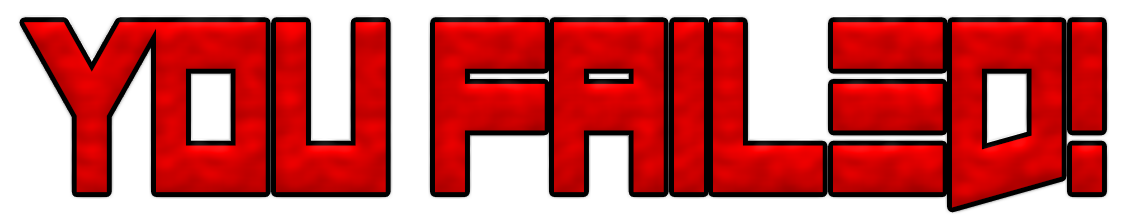
<style>
.page{position:relative;width:1127px;height:217px;background:#ffffff}
.page>*{position:absolute;margin:0}
.t1{font:315.6px "CloseandOpen";color:#d00000;scale:0.65 1}
</style>
<div class="page">
<p class="t1" style="left:24px;top:22px;width:1078px;height:186px">you failed!</p>
</div>
